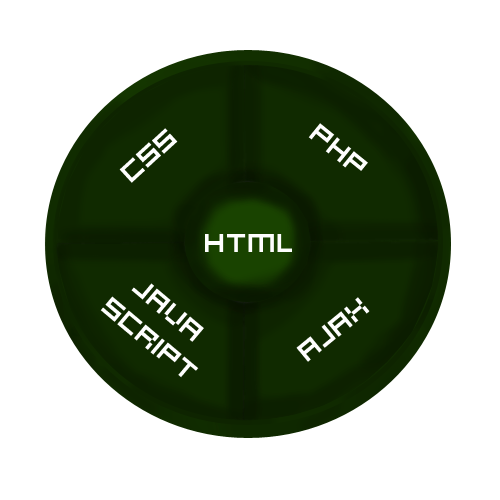
<style>
.page{position:relative;width:500px;height:500px;background:#ffffff}
.page>*{position:absolute;margin:0}
.t1{font:29px "Hooge0853";color:#fefefe}
</style>
<div class="page">
<p class="t1" style="left:308px;top:123px;width:60px;height:48px;rotate:39deg">PHP</p>
<p class="t1" style="left:119px;top:128px;width:59px;height:55px;rotate:-42deg">CSS</p>
<p class="t1" style="left:205px;top:234px;width:87px;height:18px">HTML</p>
<p class="t1" style="left:100px;top:283px;width:104px;height:95px;rotate:40deg">JAVA<br>    SCRIPT</p>
<p class="t1" style="left:296px;top:297px;width:74px;height:65px;rotate:-40deg">AJAX</p>
</div>
